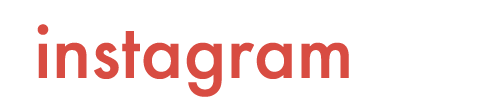
<style>
.page{position:relative;width:500px;height:110px;background:#ffffff}
.page>*{position:absolute;margin:0}
.t1{font:72px "Futura-Medium";color:#d84c42}
</style>
<div class="page">
<p class="t1" style="left:37px;top:24px;width:312px;height:73px">instagram</p>
</div>
